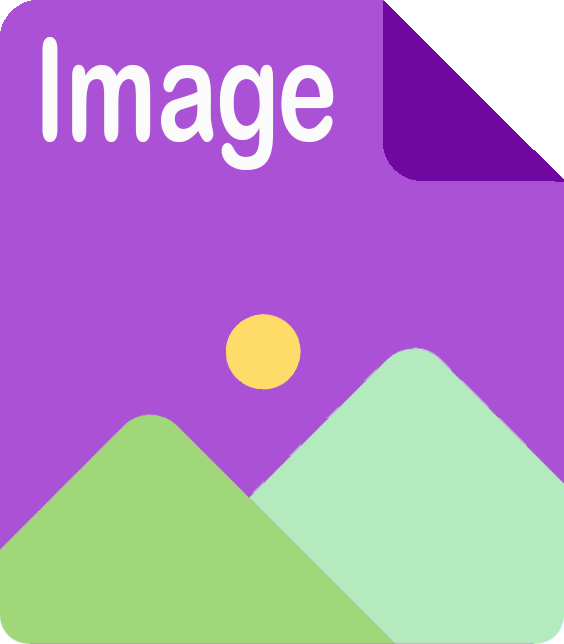
<style>
.page{position:relative;width:564px;height:644px;background:#ab51d5}
.page>*{position:absolute;margin:0}
.t1{font:140.8px "ArialRoundedMTBold";color:#fafbfa;scale:0.72 1}
</style>
<div class="page">
<p class="t1" style="left:42px;top:37px;width:292px;height:133px">Image</p>
</div>
